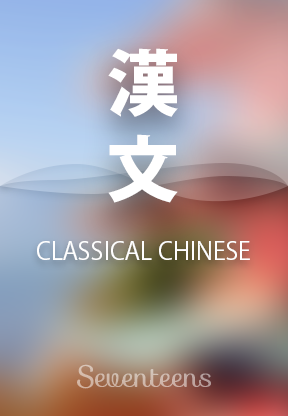
<style>
.page{position:relative;width:288px;height:416px}
.page>*{position:absolute;margin:0}
.t1{font:72px "KozGoPr6N-Heavy";color:#ffffff}
.t2{font:24px "KozGoPr6N-Regular";color:#ffffff}
.t3{font:30px "Sofia-Regular";color:#cfb6a9}
</style>
<div class="page">
<p class="t1" style="left:108px;top:48px;width:70px;height:155px;text-align:center">漢<br>文</p>
<p class="t2" style="left:37px;top:241px;width:213px;height:19px">CLASSICAL CHINESE</p>
<p class="t3" style="left:77px;top:364px;width:134px;height:25px">Seventeens</p>
<p class="t3" style="left:77px;top:364px;width:134px;height:25px">Seventeens</p>
<p class="t3" style="left:77px;top:364px;width:134px;height:25px">Seventeens</p>
<p class="t3" style="left:77px;top:364px;width:134px;height:25px">Seventeens</p>
</div>
